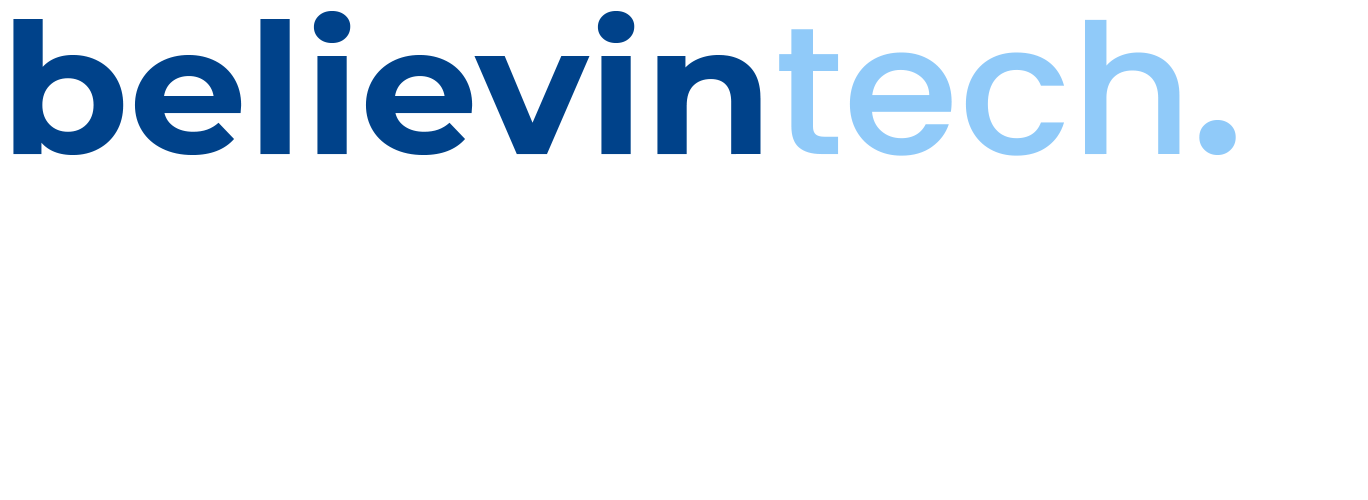
<style>
.page{position:relative;width:1368px;height:500px;background:#ffffff}
.page>*{position:absolute;margin:0}
.t1{font:181.3px "Montserrat-Bold";color:#00428a;scale:1.03 1}
.t2{font:181.3px "Poppins-Medium";color:#90caf9;scale:1.03 1}
.t3{font:181.3px "Montserrat-Bold";color:#90caf9;scale:1.03 1}
</style>
<div class="page">
<p class="t1" style="left:13px;top:11px;width:1223px;height:145px">believin<span class="t2">tech</span><span class="t3">.</span></p>
</div>
